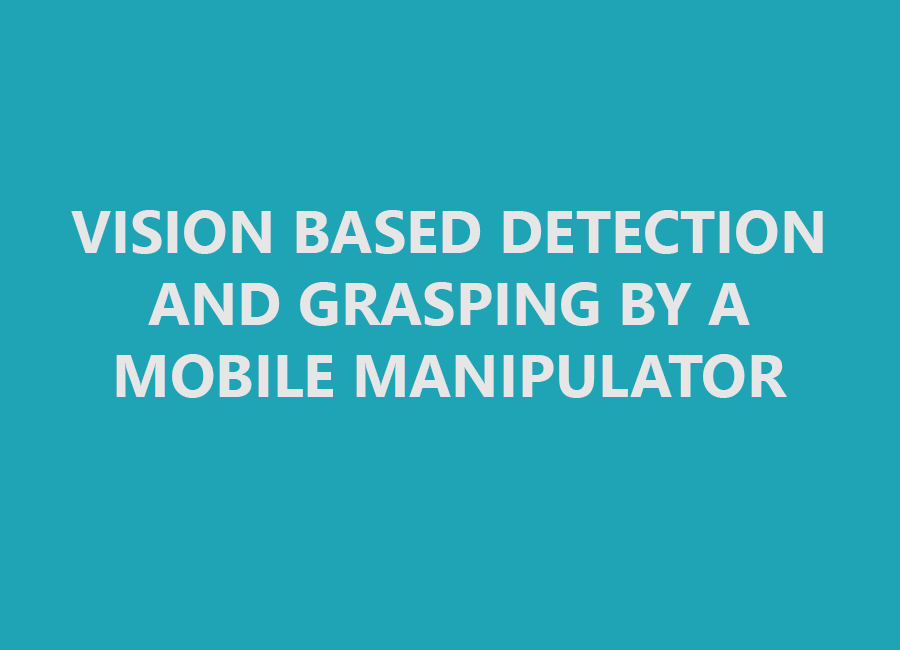
<style>
.page{position:relative;width:900px;height:650px;background:#1fa4b6}
.page>*{position:absolute;margin:0}
.t1{font:60px "SegoeUI-Bold";color:#e6e6e6}
</style>
<div class="page">
<p class="t1" style="left:71px;top:210px;width:752px;height:188px;text-align:center">VISION BASED DETECTION AND GRASPING BY A MOBILE MANIPULATOR</p>
</div>
